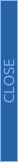
<style>
.page{position:relative;width:18px;height:162px;background:#2662a4}
.page>*{position:absolute;margin:0}
.t1{font:14px "Muli-Light";color:#7eb4f2}
</style>
<div class="page">
<p class="t1" style="left:3px;top:59px;width:12px;height:44px;rotate:-90deg">CLOSE</p>
</div>
